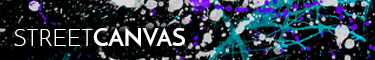
<style>
.page{position:relative;width:375px;height:60px;background:#000000}
.page>*{position:absolute;margin:0}
.t1{font:23.6px "JosefinSans-Light";color:#ffffff}
.t2{font:23.6px "JosefinSans-Bold";color:#ffffff}
</style>
<div class="page">
<p class="t1" style="left:14px;top:27px;width:171px;height:20px">STREET<span class="t2">CANVAS</span></p>
</div>
